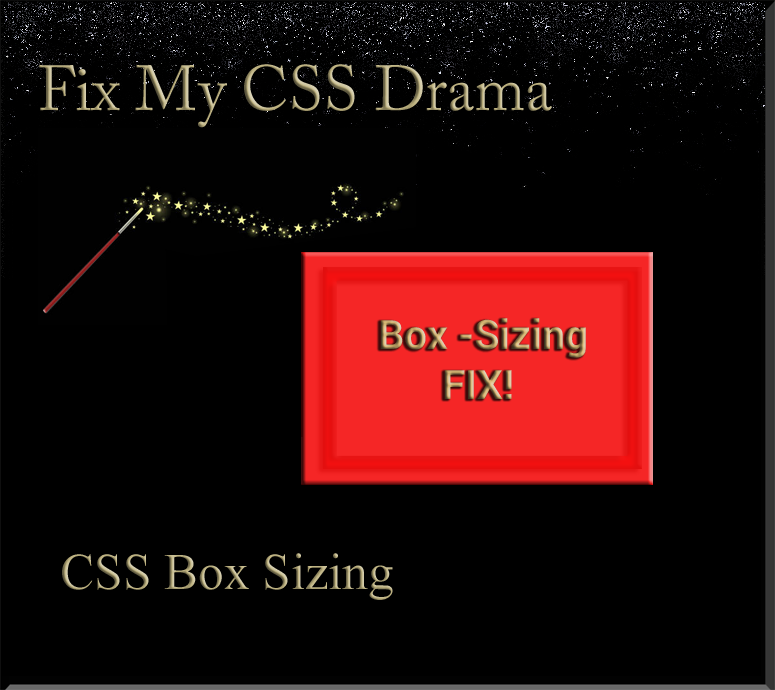
<style>
.page{position:relative;width:775px;height:690px;background:#000000}
.page>*{position:absolute;margin:0}
.t1{font:63.3px "ACaslonPro-Regular"}
.t2{font:40.5px "Roboto-Bold"}
.t3{font:51.3px "TimesNewRomanPSMT"}
</style>
<div class="page">
<p class="t1" style="left:39px;top:64px;width:513px;height:64px">Fix My CSS Drama</p>
<p class="t2" style="left:380px;top:318px;width:206px;height:40px">Box -Sizing</p>
<p class="t2" style="left:444px;top:370px;width:68px;height:29px">FIX!</p>
<p class="t3" style="left:62px;top:553px;width:331px;height:47px">CSS Box Sizing</p>
</div>
